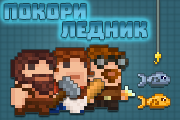
<style>
.page{position:relative;width:180px;height:120px}
.page>*{position:absolute;margin:0}
.t1{font:24px "Troika"}
</style>
<div class="page">
<p class="t1" style="left:4px;top:3px;width:82px;height:17px">Покори</p>
<p class="t1" style="left:61px;top:21px;width:86px;height:19px">ледник</p>
</div>
